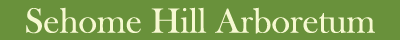
<style>
.page{position:relative;width:400px;height:40px;background:#69913b}
.page>*{position:absolute;margin:0}
.t1{font:36px "BaskOldFace";color:#f6f8d1}
</style>
<div class="page">
<p class="t1" style="left:26px;top:7px;width:349px;height:27px">Sehome Hill Arboretum</p>
</div>
